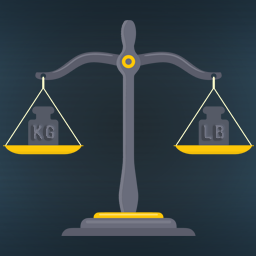
<style>
.page{position:relative;width:256px;height:256px}
.page>*{position:absolute;margin:0}
.t1{font:19px "Dosis-ExtraBold";letter-spacing:0.1em;color:#7a7c8a}
.t2{font:19px "Dosis-ExtraBold";letter-spacing:0.1em}
</style>
<div class="page">
<p class="t1" style="left:32px;top:125px;width:23px;height:15px">KG</p>
<p class="t2" style="left:203px;top:125px;width:21px;height:15px">LB</p>
</div>
